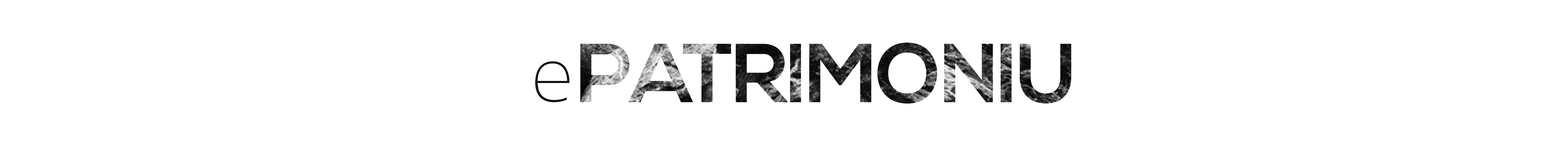
<style>
.page{position:relative;width:1568px;height:146px;background:#ffffff}
.page>*{position:absolute;margin:0}
.t1{font:83.6px "NexaBold";letter-spacing:-0.025em}
.t2{font:83.6px "MavenProLight200-Regular";letter-spacing:-0.025em;color:#121212}
</style>
<div class="page">
<p class="t1" style="left:580px;top:43px;width:491px;height:61px">PATRIMONIU</p>
<p class="t2" style="left:535px;top:61px;width:34px;height:42px">e</p>
</div>
